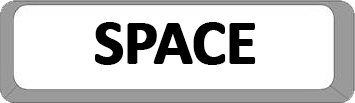
<style>
.page{position:relative;width:355px;height:103px;background:#ffffff}
.page>*{position:absolute;margin:0}
.t1{font:64px "Calibri-Bold";letter-spacing:-0.025em;color:#000000;font-weight:bold}
</style>
<div class="page">
<p class="t1" style="left:95px;top:22px;width:161px;height:43px">SPACE</p>
</div>
